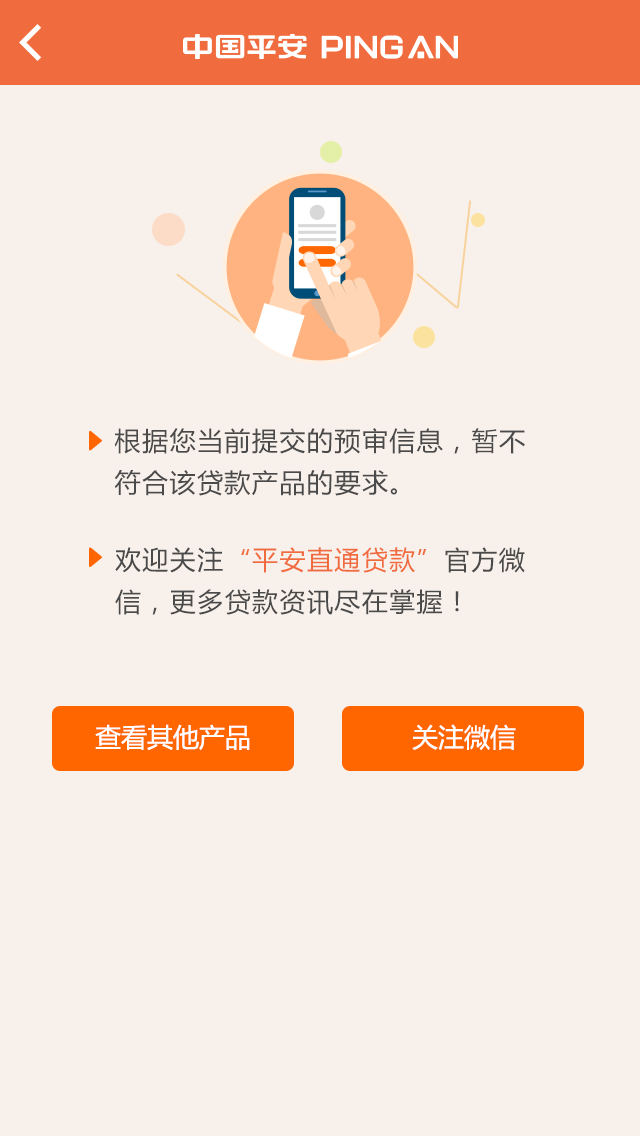
<style>
.page{position:relative;width:640px;height:1136px;background:#f8f0ea}
.page>*{position:absolute;margin:0}
.t1{font:26px/41.9px "MicrosoftYaHei";letter-spacing:0.05em;color:#4a4a4a}
.t2{font:26px/41.9px "MicrosoftYaHei";letter-spacing:0.05em;color:#f06b3e}
.t3{font:26px "MicrosoftYaHei";color:#ffffff}
</style>
<div class="page">
<p class="t1" style="left:114px;top:428px;width:411px;height:68px">根据您当前提交的预审信息，暂不<br>符合该贷款产品的要求。</p>
<p class="t1" style="left:115px;top:547px;width:410px;height:68px">欢迎关注<span class="t2">“平安直通贷款”</span>官方微<br>信，更多贷款资讯尽在掌握！</p>
<p class="t3" style="left:95px;top:724px;width:155px;height:26px">查看其他产品</p>
<p class="t3" style="left:412px;top:724px;width:104px;height:26px">关注微信</p>
</div>
